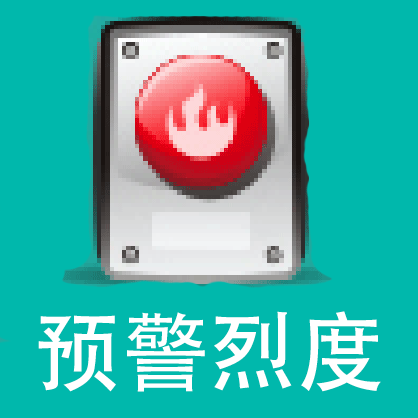
<style>
.page{position:relative;width:418px;height:418px;background:#00b8ac}
.page>*{position:absolute;margin:0}
.t1{font:88px "AdobeHeitiStd-Regular";color:#ffffff}
</style>
<div class="page">
<p class="t1" style="left:38px;top:311px;width:343px;height:81px">预警烈度</p>
</div>
